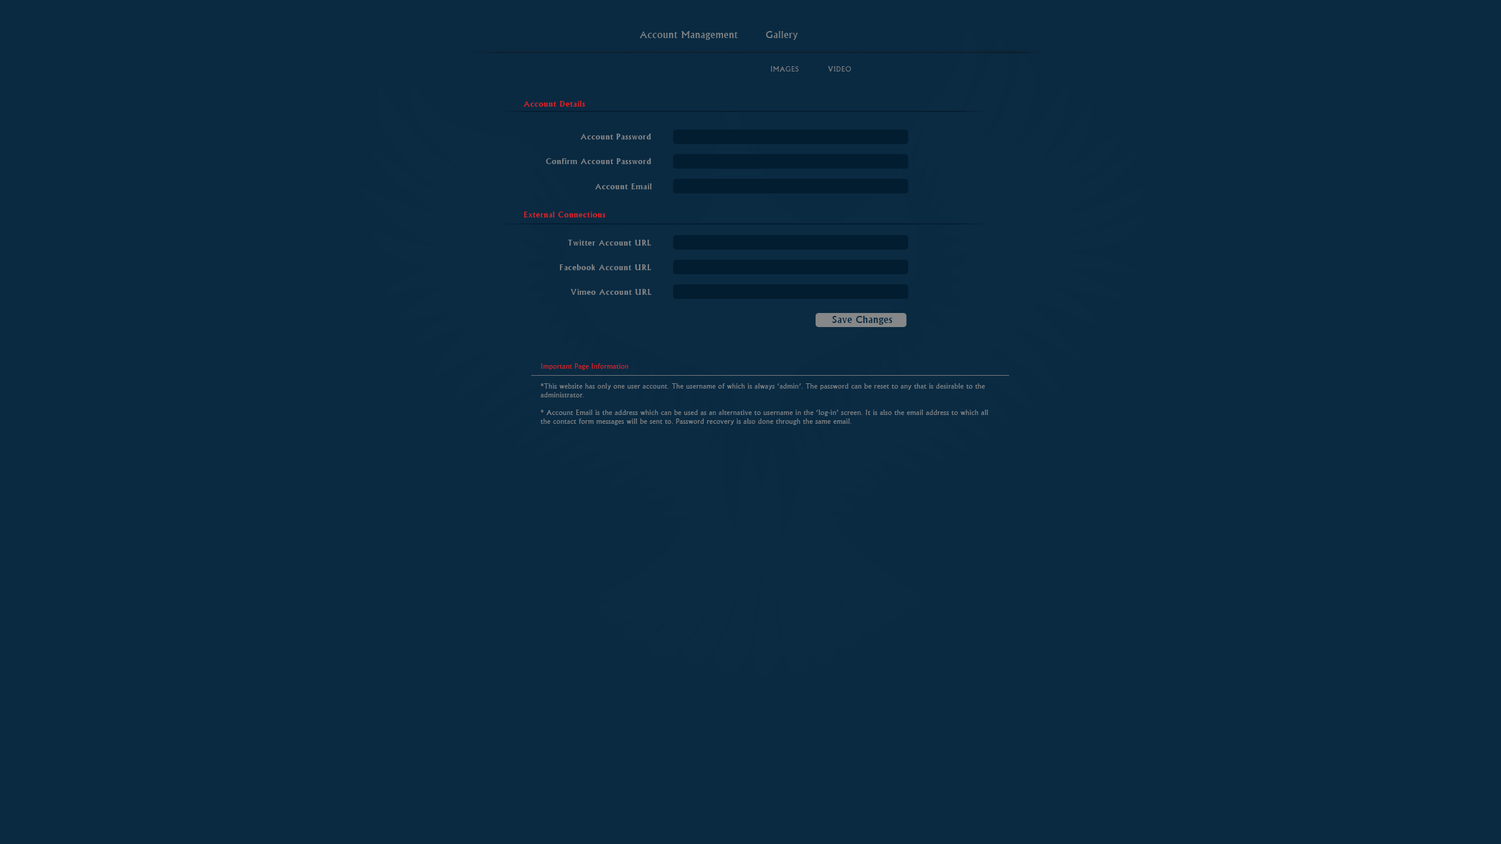
<style>
.page{position:relative;width:1501px;height:844px;background:#0a2a42}
.page>*{position:absolute;margin:0}
.t1{font:10.4px "Narkisim";letter-spacing:0.05em;color:#7d8082}
.t2{font:7.6px "Narkisim";letter-spacing:0.05em;color:#7d8082}
.t3{font:9px "Narkisim";letter-spacing:0.05em;color:#dd2227}
.t4{font:9px "Narkisim";letter-spacing:0.05em;color:#868788}
.t5{font:10.4px "Narkisim";letter-spacing:0.05em;color:#0a2a42}
.t6{font:7.3px "Narkisim";letter-spacing:0.05em;color:#dd2227}
.t7{font:7.3px "Narkisim";letter-spacing:0.05em;color:#868788}
</style>
<div class="page">
<p class="t1" style="left:640px;top:31px;width:98px;height:9px">Account Management</p>
<p class="t1" style="left:766px;top:31px;width:32px;height:9px">Gallery</p>
<p class="t2" style="left:771px;top:66px;width:28px;height:6px">IMAGES</p>
<p class="t2" style="left:828px;top:66px;width:24px;height:6px">VIDEO</p>
<p class="t3" style="left:524px;top:101px;width:61px;height:6px">Account Details</p>
<p class="t4" style="left:581px;top:134px;width:70px;height:6px">Account Password</p>
<p class="t4" style="left:546px;top:158px;width:105px;height:6px">Confirm Account Password</p>
<p class="t4" style="left:595px;top:184px;width:57px;height:5px">Account Email</p>
<p class="t3" style="left:524px;top:212px;width:82px;height:6px">External Connections</p>
<p class="t4" style="left:568px;top:240px;width:84px;height:6px">Twitter Account URL</p>
<p class="t4" style="left:559px;top:264px;width:93px;height:6px">Facebook Account URL</p>
<p class="t4" style="left:571px;top:289px;width:81px;height:6px">Vimeo Account URL</p>
<p class="t5" style="left:832px;top:316px;width:61px;height:9px">Save Changes</p>
<p class="t6" style="left:541px;top:364px;width:88px;height:6px">Important Page Information</p>
<p class="t7" style="left:541px;top:384px;width:447px;height:41px">*This website has only one user account. The username of which is always ‘admin’. The password can be reset to any that is desirable to the administrator.<br><br>* Account Email is the address which can be used as an alternative to username in the ‘log-in’ screen. It is also the email address to which all the contact form messages will be sent to. Password recovery is also done through the same email.</p>
</div>
